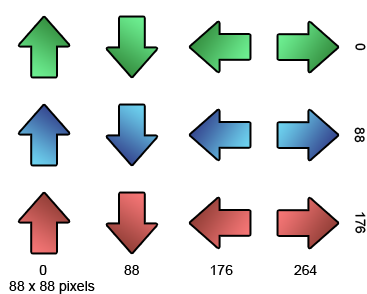
<style>
.page{position:relative;width:367px;height:294px;background:#ffffff}
.page>*{position:absolute;margin:0}
.t1{font:14px "ArialMT";color:#000000}
</style>
<div class="page">
<p class="t1" style="left:355px;top:43px;width:11px;height:8px;rotate:90deg">0</p>
<p class="t1" style="left:354px;top:127px;width:11px;height:16px;rotate:90deg">88</p>
<p class="t1" style="left:355px;top:212px;width:11px;height:22px;rotate:90deg">176</p>
<p class="t1" style="left:39px;top:265px;width:8px;height:10px">0</p>
<p class="t1" style="left:124px;top:265px;width:15px;height:10px">88</p>
<p class="t1" style="left:210px;top:265px;width:23px;height:10px">176</p>
<p class="t1" style="left:294px;top:265px;width:23px;height:10px">264</p>
<p class="t1" style="left:9px;top:281px;width:86px;height:13px">88 x 88 pixels</p>
</div>
